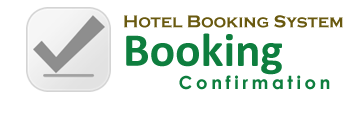
<style>
.page{position:relative;width:350px;height:120px;background:#ffffff}
.page>*{position:absolute;margin:0}
.t1{font:17.7px "CopperplateGothic-Bold";color:#69590f}
.t2{font:47.5px "Calibri-Bold";color:#0e7e3e}
.t3{font:18px "CenturyGothic-Bold";letter-spacing:0.2em;color:#0e7e3e}
</style>
<div class="page">
<p class="t1" style="left:124px;top:15px;width:219px;height:13px">Hotel Booking System</p>
<p class="t2" style="left:126px;top:33px;width:156px;height:42px">Booking</p>
<p class="t3" style="left:179px;top:75px;width:151px;height:15px">Confirmation</p>
</div>
